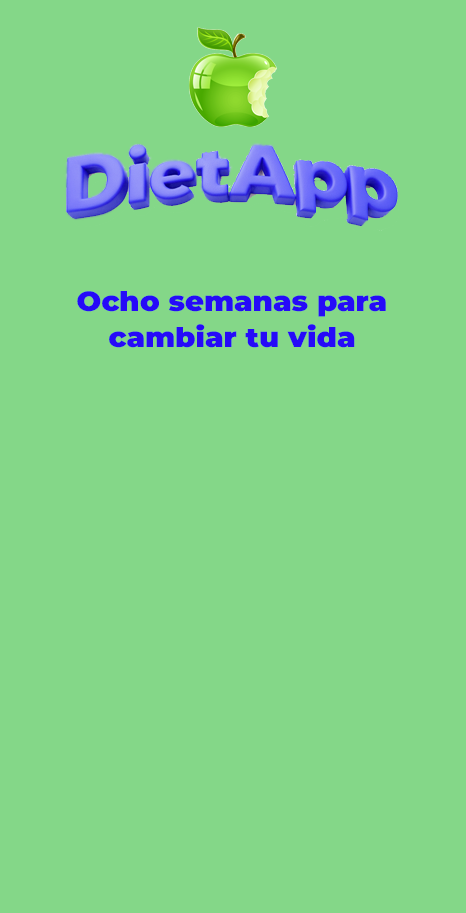
<style>
.page{position:relative;width:466px;height:913px;background:#84d788}
.page>*{position:absolute;margin:0}
.t1{font:48px/36px "Montserrat-Black";color:#260af8;scale:1.04 1}
</style>
<div class="page">
<p class="t1" style="left:77px;top:291px;width:309px;height:57px;text-align:center">Ocho semanas para<br>cambiar tu vida</p>
</div>
